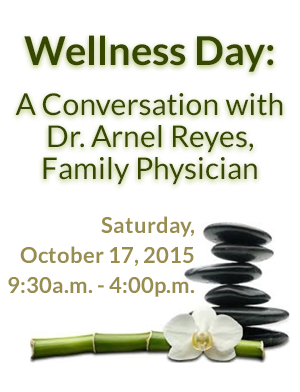
<style>
.page{position:relative;width:300px;height:392px;background:#ffffff}
.page>*{position:absolute;margin:0}
.t1{font:30px/32px "Lato-Regular";color:#364702}
.t2{font:40px/36px "Lato-Bold";color:#364702}
.t3{font:22px/30px "Lato-Bold";color:#988d4c}
</style>
<div class="page">
<p class="t1" style="left:15px;top:35px;width:268px;height:150px;text-align:center"><span class="t2">Wellness Day:<br><br><br></span>A Conversation with Dr. Arnel Reyes, Family Physician</p>
<p class="t3" style="left:8px;top:216px;width:187px;height:81px;text-align:right">Saturday, <br>October 17, 2015<br>9:30a.m. - 4:00p.m.</p>
</div>
